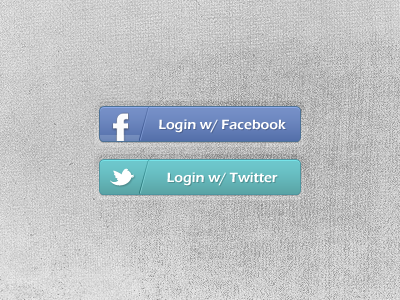
<style>
.page{position:relative;width:400px;height:300px}
.page>*{position:absolute;margin:0}
.t1{font:14px "ErasITC-Demi";color:#ffffff}
</style>
<div class="page">
<p class="t1" style="left:159px;top:119px;width:127px;height:14px">Login w/ Facebook</p>
<p class="t1" style="left:167px;top:172px;width:111px;height:14px">Login w/ Twitter</p>
</div>
